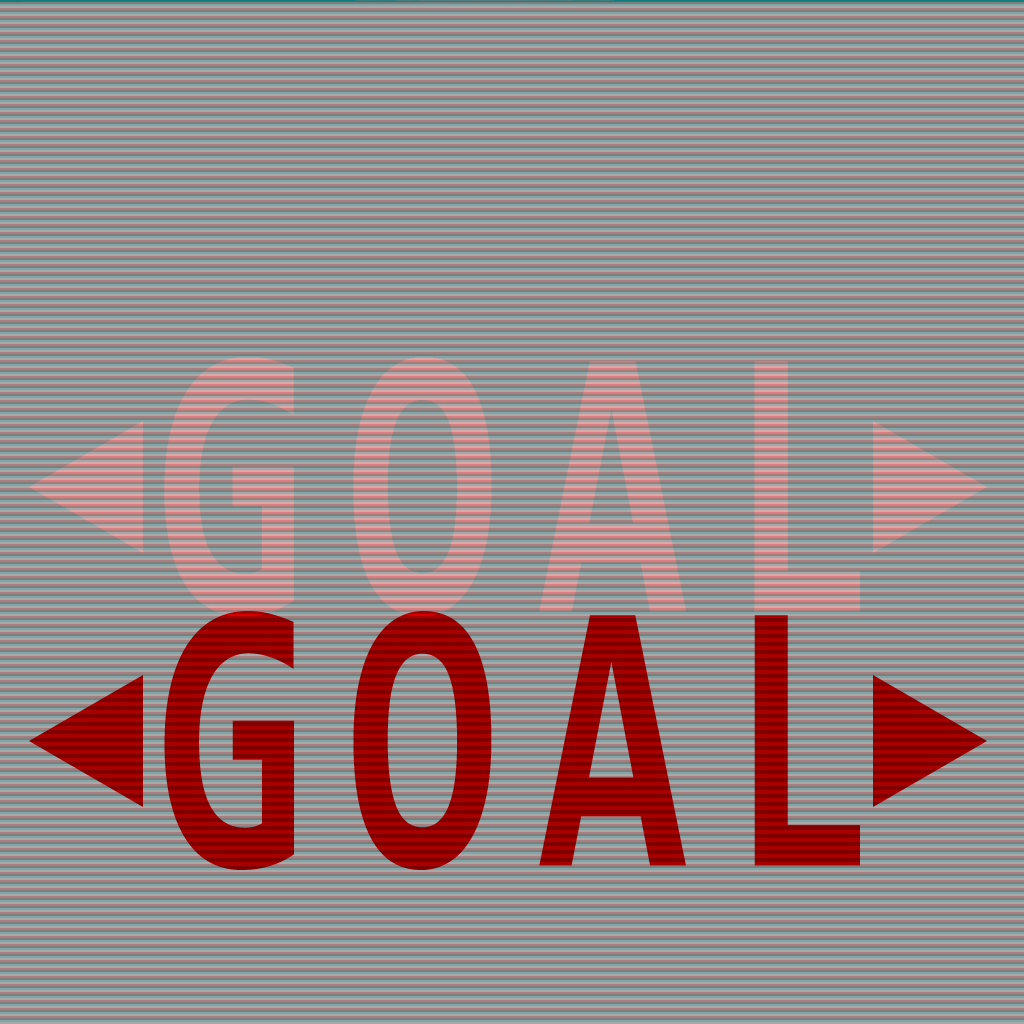
<style>
.page{position:relative;width:1024px;height:1024px;background:#a87e7e}
.page>*{position:absolute;margin:0}
.t1{font:392px "Consolas-Bold";letter-spacing:0.16em;scale:0.68 1}
</style>
<div class="page">
<p class="t1" style="left:164px;top:355px;width:696px;height:259px">GOAL</p>
</div>
